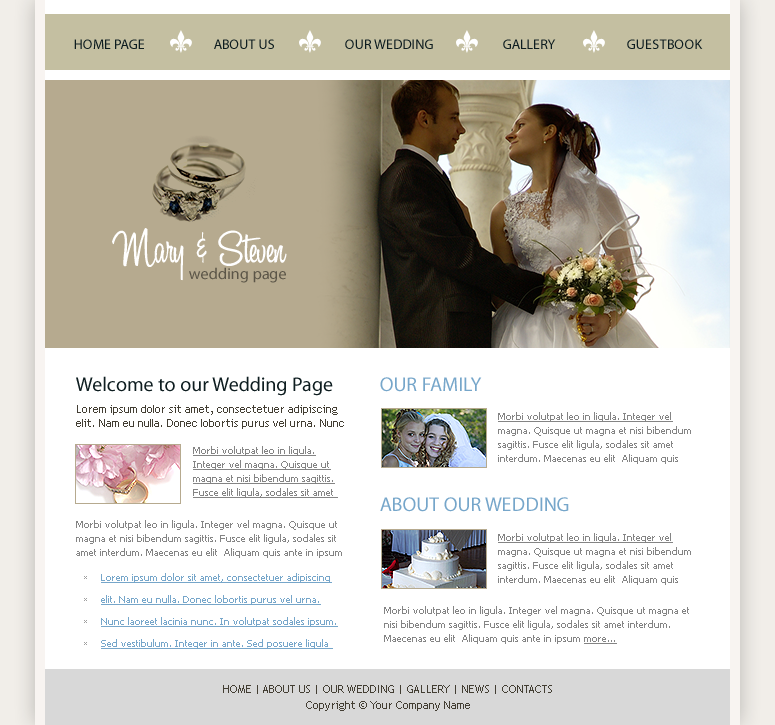
<style>
.page{position:relative;width:775px;height:725px;background:#ffffff}
.page>*{position:absolute;margin:0}
.t1{font:14px "MyriadPro-Regular";color:#0e1d20}
.t2{font:48px "A&S-Black-Swan";color:#ffffff}
.t3{font:16px "MyriadPro-Regular";color:#5b5547}
.t4{font:20px "MyriadPro-Regular";color:#0e1d20}
.t5{font:20px "MyriadPro-Regular";color:#76a6ca}
.t6{font:11px/14px "TrebuchetMS";color:#433e33}
.t7{font:10px/14px "Tahoma";color:#848484}
.t8{font:10px/14px "Tahoma";color:#848484;text-decoration:underline}
.t9{font:10px/16px "Tahoma";color:#848484}
.t10{font:10px/22px "Tahoma";color:#76a6ca;text-decoration:underline}
.t11{font:11px/16px "TrebuchetMS";color:#433e33}
</style>
<div class="page">
<p class="t1" style="left:74px;top:39px;width:70px;height:10px">HOME PAGE</p>
<p class="t1" style="left:214px;top:39px;width:60px;height:10px">ABOUT US</p>
<p class="t1" style="left:345px;top:39px;width:88px;height:10px">OUR WEDDING</p>
<p class="t1" style="left:503px;top:39px;width:53px;height:10px">GALLERY</p>
<p class="t1" style="left:627px;top:39px;width:76px;height:10px">GUESTBOOK</p>
<p class="t2" style="left:112px;top:228px;width:175px;height:53px">Mary &amp; Steven</p>
<p class="t3" style="left:189px;top:267px;width:97px;height:16px">wedding page</p>
<p class="t4" style="left:76px;top:376px;width:257px;height:20px">Welcome to our Wedding Page</p>
<p class="t5" style="left:380px;top:377px;width:102px;height:15px">OUR FAMILY</p>
<p class="t6" style="left:76px;top:405px;width:268px;height:24px">Lorem ipsum dolor sit amet, consectetuer adipiscing elit. Nam eu nulla. Donec lobortis purus vel urna. Nunc</p>
<p class="t7" style="left:498px;top:412px;width:193px;height:52px"><span class="t8">Morbi volutpat leo in ligula. Integer vel </span>magna. Quisque ut magna et nisi bibendum sagittis. Fusce elit ligula, sodales sit amet interdum. Maecenas eu elit  Aliquam quis</p>
<p class="t8" style="left:193px;top:446px;width:145px;height:52px">Morbi volutpat leo in ligula. Integer vel magna. Quisque ut magna et nisi bibendum sagittis. Fusce elit ligula, sodales sit amet</p>
<p class="t5" style="left:380px;top:497px;width:189px;height:15px">ABOUT OUR WEDDING</p>
<p class="t7" style="left:76px;top:520px;width:266px;height:38px"><span class="t9">Morbi volutpat leo in ligula. Integer vel magna. </span>Quisque ut magna et nisi bibendum sagittis. Fusce elit ligula, sodales sit amet interdum. Maecenas eu elit  Aliquam quis ante in ipsum</p>
<p class="t7" style="left:498px;top:533px;width:193px;height:52px"><span class="t8">Morbi volutpat leo in ligula. Integer vel </span>magna. Quisque ut magna et nisi bibendum sagittis. Fusce elit ligula, sodales sit amet interdum. Maecenas eu elit  Aliquam quis</p>
<p class="t10" style="left:101px;top:573px;width:237px;height:76px">Lorem ipsum dolor sit amet, consectetuer adipiscing elit. Nam eu nulla. Donec lobortis purus vel urna. Nunc laoreet lacinia nunc. In volutpat sodales ipsum. Sed vestibulum. Integer in ante. Sed posuere ligula</p>
<p class="t7" style="left:384px;top:606px;width:305px;height:38px"><span class="t9">Morbi volutpat leo in ligula. Integer vel magna. </span>Quisque ut magna et nisi bibendum sagittis. Fusce elit ligula, sodales sit amet interdum. Maecenas eu elit  Aliquam quis ante in ipsum <span class="t8">more...</span></p>
<p class="t11" style="left:223px;top:685px;width:329px;height:26px;text-align:center">HOME | ABOUT US | OUR WEDDING | GALLERY | NEWS | CONTACTS<br>Copyright © Your Company Name</p>
</div>
